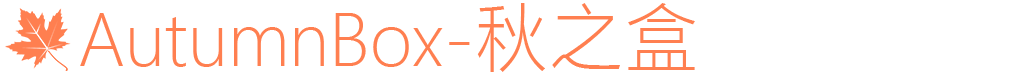
<style>
.page{position:relative;width:1017px;height:76px;background:#ffffff}
.page>*{position:absolute;margin:0}
.t1{font:75px "MicrosoftYaHeiUILight";color:#ff7f50}
</style>
<div class="page">
<p class="t1" style="left:80px;top:3px;width:615px;height:69px">AutumnBox-秋之盒</p>
</div>
